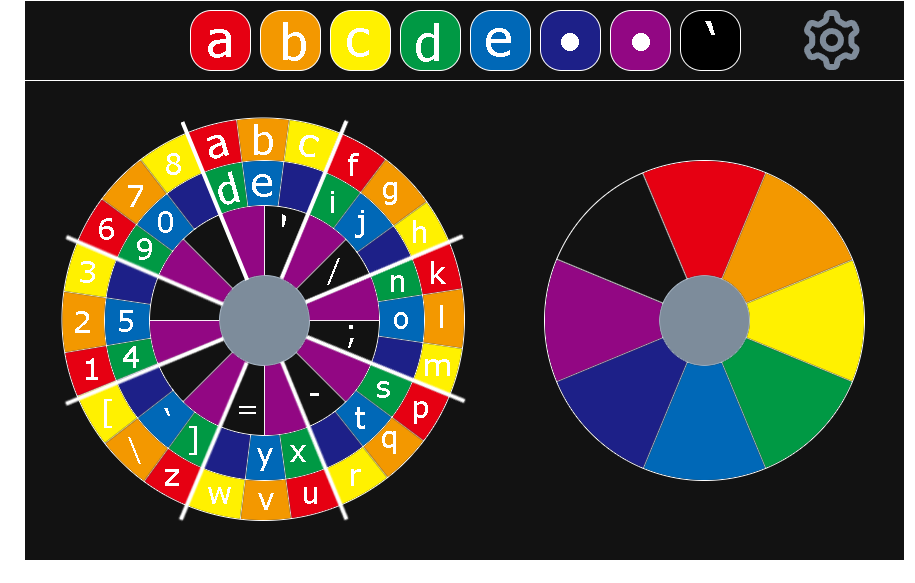
<style>
.page{position:relative;width:915px;height:583px;background:#121212}
.page>*{position:absolute;margin:0}
.t1{font:50px "Verdana";color:#ffffff}
.t2{font:40px "Verdana";color:#ffffff}
.t3{font:30px "Verdana";color:#ffffff}
</style>
<div class="page">
<p class="t1" style="left:208px;top:29px;width:23px;height:29px">a</p>
<p class="t1" style="left:283px;top:22px;width:23px;height:39px">b</p>
<p class="t1" style="left:347px;top:28px;width:22px;height:29px">c</p>
<p class="t1" style="left:416px;top:23px;width:23px;height:39px">d</p>
<p class="t1" style="left:486px;top:28px;width:25px;height:29px">e</p>
<p class="t1" style="left:705px;top:21px;width:10px;height:14px">‘</p>
<p class="t1" style="left:561px;top:33px;width:18px;height:18px">•</p>
<p class="t1" style="left:632px;top:33px;width:18px;height:18px">•</p>
<p class="t2" style="left:254px;top:124px;width:19px;height:31px">b</p>
<p class="t2" style="left:207px;top:135px;width:22px;height:24px;rotate:-17deg">a</p>
<p class="t2" style="left:299px;top:135px;width:20px;height:22px;rotate:14deg">c</p>
<p class="t3" style="left:166px;top:153px;width:15px;height:22px">8</p>
<p class="t3" style="left:348px;top:153px;width:11px;height:23px">f</p>
<p class="t2" style="left:218px;top:171px;width:22px;height:34px;rotate:-16deg">d</p>
<p class="t2" style="left:252px;top:174px;width:20px;height:23px">e</p>
<p class="t3" style="left:128px;top:185px;width:15px;height:22px">7</p>
<p class="t3" style="left:383px;top:182px;width:14px;height:23px">g</p>
<p class="t3" style="left:331px;top:191px;width:3px;height:22px">i</p>
<p class="t3" style="left:99px;top:218px;width:15px;height:22px">6</p>
<p class="t3" style="left:158px;top:211px;width:15px;height:22px">0</p>
<p class="t2" style="left:282px;top:214px;width:4px;height:13px;rotate:28deg">‘</p>
<p class="t3" style="left:355px;top:210px;width:9px;height:28px">j</p>
<p class="t3" style="left:413px;top:220px;width:13px;height:23px">h</p>
<p class="t3" style="left:137px;top:238px;width:15px;height:22px">9</p>
<p class="t3" style="left:80px;top:261px;width:15px;height:22px">3</p>
<p class="t3" style="left:327px;top:258px;width:13px;height:27px">/</p>
<p class="t3" style="left:431px;top:261px;width:15px;height:23px">k</p>
<p class="t3" style="left:391px;top:275px;width:13px;height:17px">n</p>
<p class="t3" style="left:75px;top:311px;width:15px;height:22px">2</p>
<p class="t3" style="left:119px;top:310px;width:14px;height:22px">5</p>
<p class="t3" style="left:394px;top:312px;width:14px;height:17px">o</p>
<p class="t3" style="left:348px;top:325px;width:6px;height:23px">;</p>
<p class="t3" style="left:123px;top:346px;width:16px;height:22px">4</p>
<p class="t3" style="left:86px;top:358px;width:12px;height:22px">1</p>
<p class="t3" style="left:425px;top:359px;width:25px;height:17px">m</p>
<p class="t3" style="left:377px;top:381px;width:13px;height:17px">s</p>
<p class="t3" style="left:104px;top:399px;width:8px;height:29px">[</p>
<p class="t3" style="left:414px;top:401px;width:14px;height:23px">p</p>
<p class="t3" style="left:164px;top:408px;width:6px;height:8px">‘</p>
<p class="t3" style="left:239px;top:406px;width:17px;height:8px">=</p>
<p class="t3" style="left:355px;top:407px;width:10px;height:22px">t</p>
<p class="t3" style="left:128px;top:437px;width:13px;height:27px">\</p>
<p class="t3" style="left:189px;top:426px;width:8px;height:29px">]</p>
<p class="t3" style="left:382px;top:431px;width:14px;height:23px">q</p>
<p class="t3" style="left:257px;top:448px;width:16px;height:23px">y</p>
<p class="t3" style="left:290px;top:445px;width:16px;height:17px">x</p>
<p class="t3" style="left:165px;top:469px;width:14px;height:17px">z</p>
<p class="t3" style="left:351px;top:469px;width:10px;height:17px">r</p>
<p class="t3" style="left:208px;top:487px;width:23px;height:17px">w</p>
<p class="t3" style="left:258px;top:493px;width:16px;height:17px">v</p>
<p class="t3" style="left:304px;top:487px;width:13px;height:17px">u</p>
</div>
